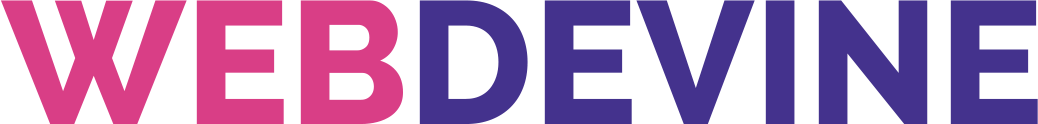
<style>
.page{position:relative;width:1038px;height:124px;background:#ffffff}
.page>*{position:absolute;margin:0}
.t1{font:174px "Raleway-ExtraBold";color:#44328d}
.t2{font:174px "Raleway-ExtraBold";color:#d93e86}
</style>
<div class="page">
<p class="t1" style="left:0px;top:0px;width:1038px;height:124px"><span class="t2">WEB</span>DEVINE</p>
</div>
